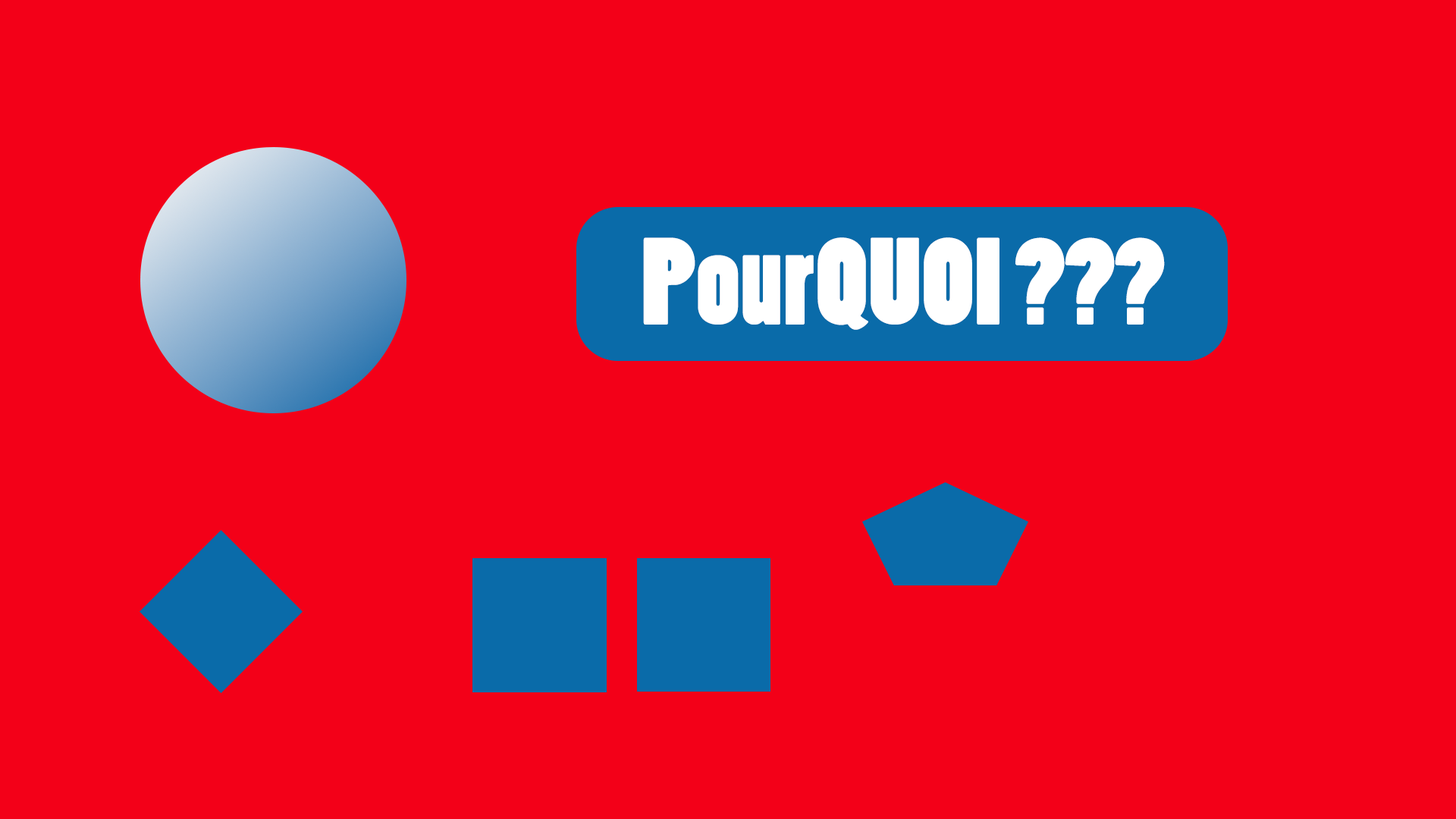
<style>
.page{position:relative;width:1456px;height:819px;background:#f30018}
.page>*{position:absolute;margin:0}
.t1{font:115.6px "PoplarStd";letter-spacing:0.01em;color:#ffffff}
</style>
<div class="page">
<p class="t1" style="left:643px;top:237px;width:522px;height:93px">PourQUOI ???</p>
</div>
